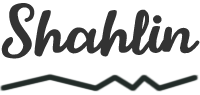
<style>
.page{position:relative;width:200px;height:95px;background:#ffffff}
.page>*{position:absolute;margin:0}
.t1{font:55px "Stika";color:#333333}
</style>
<div class="page">
<p class="t1" style="left:1px;top:3px;width:199px;height:56px">Shahlin</p>
</div>
